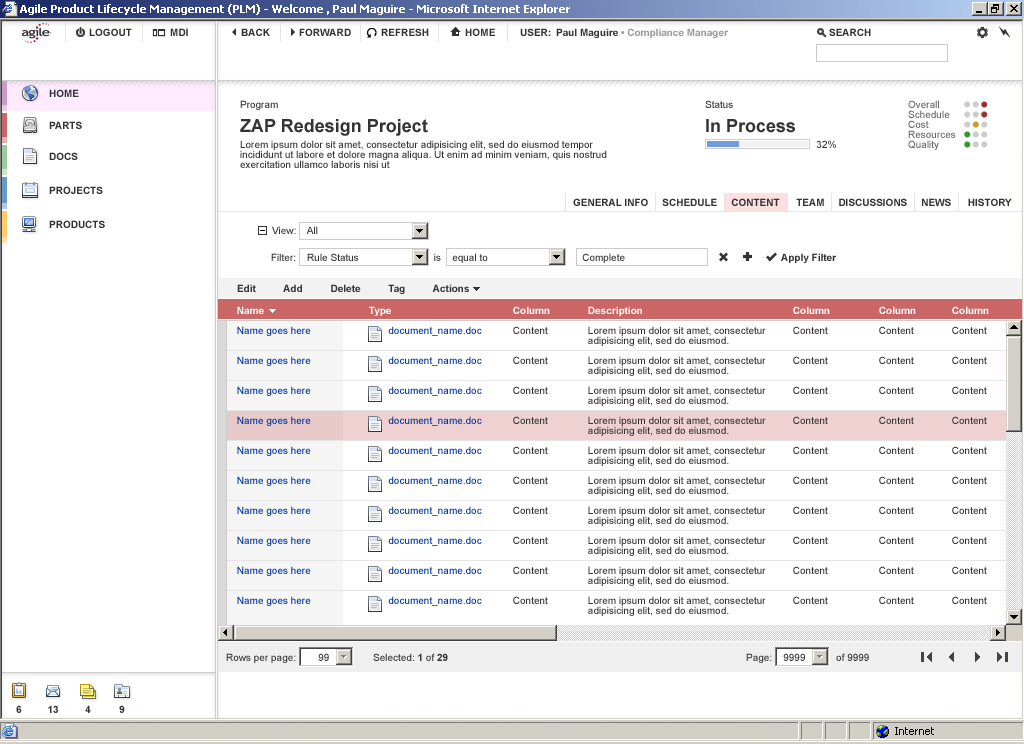
<style>
.page{position:relative;width:1024px;height:744px;background:#ffffff}
.page>*{position:absolute;margin:0}
.t1{font:10px "Arial-BoldMT";color:#333333}
.t2{font:10px "Arial-BoldMT";color:#999999}
.t3{font:10px/10px "ArialMT";color:#333333}
.t4{font:18px/18px "Arial-BoldMT";color:#333333}
.t5{font:10px/10px "ArialMT";color:#666666}
.t6{font:24px/10px "ArialMT";color:#cccccc}
.t7{font:24px/10px "ArialMT";color:#993333}
.t8{font:24px/10px "ArialMT";color:#cc9933}
.t9{font:24px/10px "ArialMT";color:#339933}
.t10{font:10px "ArialMT";color:#333333}
.t11{font:10px/10px "ArialMT";color:#003399}
.t12{font:10px "Arial-BoldMT";color:#ffffff}
.t13{font:10px/8px "Arial-BoldMT";color:#ffffff}
</style>
<div class="page">
<p class="t1" style="left:89px;top:28px;width:43px;height:8px">LOGOUT</p>
<p class="t1" style="left:170px;top:28px;width:18px;height:8px">MDI</p>
<p class="t1" style="left:241px;top:28px;width:29px;height:8px">BACK</p>
<p class="t1" style="left:299px;top:28px;width:52px;height:8px">FORWARD</p>
<p class="t1" style="left:381px;top:28px;width:48px;height:8px">REFRESH</p>
<p class="t1" style="left:465px;top:28px;width:30px;height:8px">HOME</p>
<p class="t2" style="left:520px;top:28px;width:209px;height:10px"><span class="t1">USER: Paul Maguire </span>• Compliance Manager</p>
<p class="t1" style="left:829px;top:28px;width:42px;height:8px">SEARCH</p>
<p class="t1" style="left:49px;top:89px;width:30px;height:8px">HOME</p>
<p class="t3" style="left:240px;top:100px;width:367px;height:68px">Program<br><span class="t4">ZAP Redesign Project<br></span>Lorem ipsum dolor sit amet, consectetur adipisicing elit, sed do eiusmod tempor<br>incididunt ut labore et dolore magna aliqua. Ut enim ad minim veniam, quis nostrud<br>exercitation ullamco laboris nisi ut</p>
<p class="t4" style="left:705px;top:100px;width:131px;height:48px"><span class="t3">Status<br></span>In Process<br>    <span class="t3">32%</span></p>
<p class="t5" style="left:908px;top:100px;width:48px;height:50px">Overall<br>Schedule<br>Cost<br>Resources<br>Quality</p>
<p class="t6" style="left:964px;top:101px;width:24px;height:47px">••<span class="t7">•<br></span>••<span class="t7">•<br></span>•<span class="t8">•</span>•<br><span class="t9">•</span>••<br><span class="t9">•</span>••</p>
<p class="t1" style="left:49px;top:121px;width:33px;height:8px">PARTS</p>
<p class="t1" style="left:49px;top:152px;width:29px;height:8px">DOCS</p>
<p class="t1" style="left:49px;top:186px;width:54px;height:8px">PROJECTS</p>
<p class="t1" style="left:573px;top:198px;width:439px;height:8px">GENERAL INFO     SCHEDULE     CONTENT      TEAM     DISCUSSIONS     NEWS      HISTORY</p>
<p class="t1" style="left:49px;top:220px;width:56px;height:8px">PRODUCTS</p>
<p class="t10" style="left:272px;top:226px;width:46px;height:8px">View:    All</p>
<p class="t10" style="left:271px;top:253px;width:354px;height:10px">Filter:    Rule Status                           is    equal to                                  Complete</p>
<p class="t1" style="left:781px;top:253px;width:56px;height:10px">Apply Filter</p>
<p class="t1" style="left:237px;top:284px;width:232px;height:10px">Edit          Add          Delete          Tag          Actions</p>
<p class="t11" style="left:237px;top:306px;width:74px;height:300px"><span class="t12">N</span><span class="t13">ame<br><br></span>Name goes here<br><br><br>Name goes here<br><br><br>Name goes here<br><br><br>Name goes here<br><br><br>Name goes here<br><br><br>Name goes here<br><br><br>Name goes here<br><br><br>Name goes here<br><br><br>Name goes here<br><br><br>Name goes here</p>
<p class="t11" style="left:369px;top:306px;width:113px;height:300px"><span class="t12">Type<br><br></span>       document_name.doc<br><br><br>       document_name.doc<br><br><br>       document_name.doc<br><br><br>       document_name.doc<br><br> <br>       document_name.doc<br><br><br>       document_name.doc<br><br><br>       document_name.doc<br><br><br>       document_name.doc<br><br><br>       document_name.doc<br><br><br>       document_name.doc</p>
<p class="t3" style="left:513px;top:306px;width:37px;height:298px"><span class="t12">Column<br></span><br>Content<br><br><br>Content<br><br><br>Content<br><br><br>Content<br><br><br>Content<br><br><br>Content<br><br><br>Content<br><br><br>Content<br><br><br>Content<br><br><br>Content</p>
<p class="t3" style="left:588px;top:306px;width:178px;height:310px"><span class="t12">De</span><span class="t13">scription<br></span><br>Lorem ipsum dolor sit amet, consectetur <br>adipisicing elit, sed do eiusmod.<br><br>Lorem ipsum dolor sit amet, consectetur <br>adipisicing elit, sed do eiusmod.<br><br>Lorem ipsum dolor sit amet, consectetur <br>adipisicing elit, sed do eiusmod.<br><br>Lorem ipsum dolor sit amet, consectetur <br>adipisicing elit, sed do eiusmod.<br><br>Lorem ipsum dolor sit amet, consectetur <br>adipisicing elit, sed do eiusmod.<br><br>Lorem ipsum dolor sit amet, consectetur <br>adipisicing elit, sed do eiusmod.<br><br>Lorem ipsum dolor sit amet, consectetur <br>adipisicing elit, sed do eiusmod.<br><br>Lorem ipsum dolor sit amet, consectetur <br>adipisicing elit, sed do eiusmod.<br><br>Lorem ipsum dolor sit amet, consectetur <br>adipisicing elit, sed do eiusmod.<br><br>Lorem ipsum dolor sit amet, consectetur <br>adipisicing elit, sed do eiusmod.</p>
<p class="t3" style="left:793px;top:306px;width:37px;height:298px"><span class="t12">Column<br></span><br>Content<br><br><br>Content<br><br><br>Content<br><br><br>Content<br><br><br>Content<br><br><br>Content<br><br><br>Content<br><br><br>Content<br><br><br>Content<br><br><br>Content</p>
<p class="t3" style="left:879px;top:306px;width:37px;height:298px"><span class="t12">Column<br><br></span>Content<br><br><br>Content<br><br><br>Content<br><br><br>Content<br><br><br>Content<br><br><br>Content<br><br><br>Content<br><br><br>Content<br><br><br>Content<br><br><br>Content</p>
<p class="t3" style="left:952px;top:306px;width:37px;height:298px"><span class="t12">Column<br></span><br>Content<br><br><br>Content<br><br><br>Content<br><br><br>Content<br><br><br>Content<br><br><br>Content<br><br><br>Content<br><br><br>Content<br><br><br>Content<br><br><br>Content</p>
<p class="t10" style="left:226px;top:653px;width:103px;height:10px">Rows per page:        99</p>
<p class="t10" style="left:373px;top:653px;width:75px;height:8px">Selected: <span class="t1">1</span> of <span class="t1">29</span></p>
<p class="t10" style="left:746px;top:653px;width:123px;height:10px">Page:    9999           of 9999</p>
<p class="t1" style="left:16px;top:705px;width:6px;height:8px">6</p>
<p class="t1" style="left:48px;top:705px;width:10px;height:8px">13</p>
<p class="t1" style="left:85px;top:705px;width:6px;height:8px">4</p>
<p class="t1" style="left:119px;top:705px;width:6px;height:8px">9</p>
</div>
